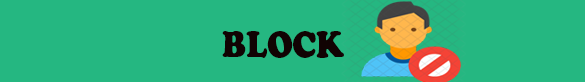
<style>
.page{position:relative;width:585px;height:82px;background:#25b781}
.page>*{position:absolute;margin:0}
.t1{font:36.4px "CooperBlackStd";color:#110303;scale:0.87 1}
</style>
<div class="page">
<p class="t1" style="left:222px;top:31px;width:122px;height:27px">BLOCK</p>
</div>
